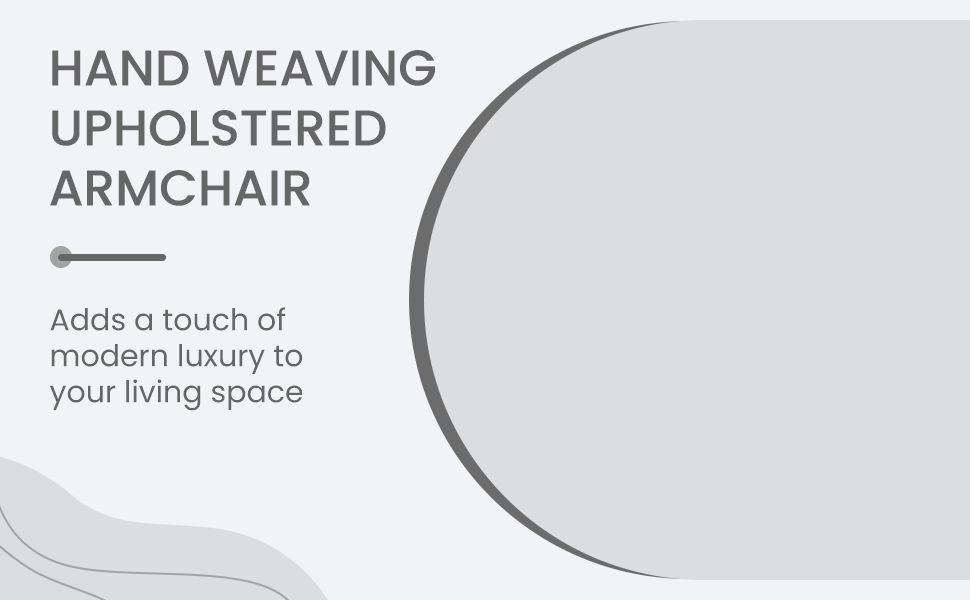
<style>
.page{position:relative;width:970px;height:600px;background:#dcdddf}
.page>*{position:absolute;margin:0}
.t1{font:50px "Poppins-Medium";color:#666666}
.t2{font:30px "Poppins-Regular";color:#666666}
</style>
<div class="page">
<p class="t1" style="left:50px;top:50px;width:385px;height:156px">HAND WEAVING<br>UPHOLSTERED<br>ARMCHAIR</p>
<p class="t2" style="left:50px;top:307px;width:253px;height:104px">Adds a touch of<br>modern luxury to<br>your living space</p>
</div>
